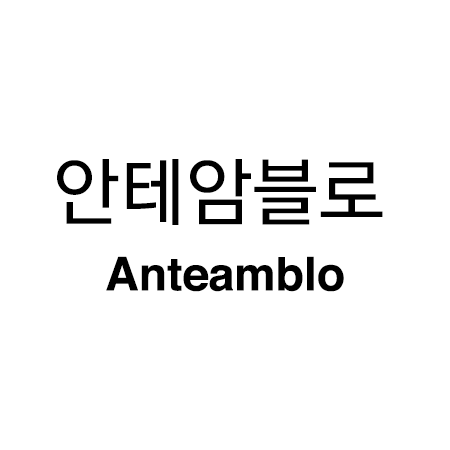
<style>
.page{position:relative;width:450px;height:450px;background:#ffffff}
.page>*{position:absolute;margin:0}
.t1{font:73.8px "YGO530";color:#000000}
.t2{font:46.4px "Helvetica-Bold";color:#000000}
</style>
<div class="page">
<p class="t1" style="left:57px;top:159px;width:326px;height:66px">안테암블로</p>
<p class="t2" style="left:106px;top:256px;width:238px;height:36px">Anteamblo</p>
</div>
